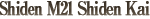
<style>
.page{position:relative;width:150px;height:19px;background:#ffffff}
.page>*{position:absolute;margin:0}
.t1{font:18px "RyuminPro-ExBold";letter-spacing:-0.08em;color:#4a3f32;font-weight:bold;scale:0.85 1}
</style>
<div class="page">
<p class="t1" style="left:0px;top:1px;width:150px;height:15px">Shiden M21 Shiden Kai</p>
</div>
